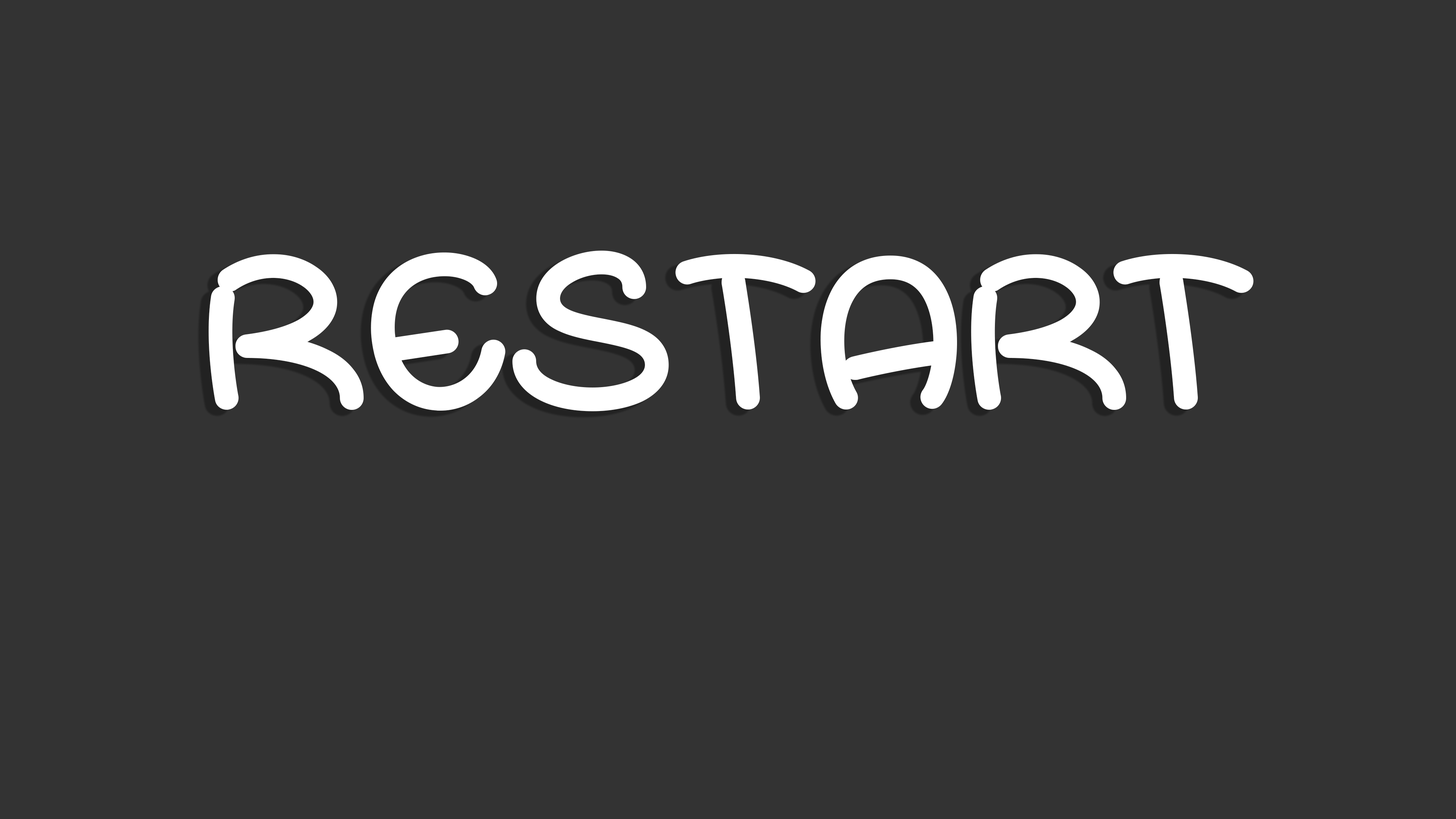
<style>
.page{position:relative;width:1456px;height:819px;background:#333333}
.page>*{position:absolute;margin:0}
.t1{font:237px "OhWhale";color:#ffffff}
</style>
<div class="page">
<p class="t1" style="left:209px;top:251px;width:1045px;height:160px">RESTART</p>
</div>
